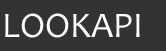
<style>
.page{position:relative;width:166px;height:51px;background:#333333}
.page>*{position:absolute;margin:0}
.t1{font:36px "Candara";color:#ffffff;text-transform:uppercase}
</style>
<div class="page">
<p class="t1" style="left:5px;top:13px;width:135px;height:25px">lookapi</p>
</div>
